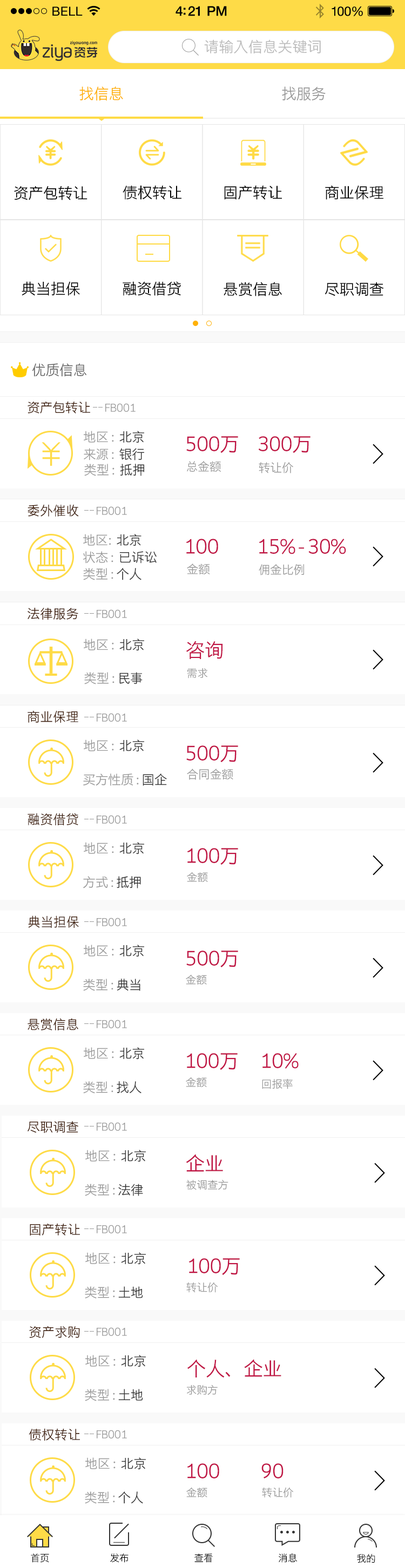
<style>
.page{position:relative;width:405px;height:1568px;background:#ffffff}
.page>*{position:absolute;margin:0}
.t1{font:13.5px "HelveticaNeue-Medium";letter-spacing:-0.02em;color:#000000}
.t2{font:12.4px "HelveticaNeue";letter-spacing:0.02em;color:#000000}
.t3{font:13px "HelveticaNeue";letter-spacing:-0.02em;color:#010101}
.t4{font:14.7px "STHeitiSC-Light";color:#bbbbbb}
.t5{font:15.1px "STHeitiSC-Light";letter-spacing:-0.02em;color:#ffb107}
.t6{font:15.1px "STHeitiSC-Light";letter-spacing:-0.02em;color:#999999}
.t7{font:15.1px "STHeitiSC-Light";letter-spacing:-0.02em;color:#000000}
.t8{font:14px "STHeitiSC-Light";letter-spacing:-0.02em;color:#666666}
.t9{font:13px "STHeitiSC-Light";letter-spacing:-0.02em;color:#41210f}
.t10{font:10.8px "STHeitiSC-Light";letter-spacing:-0.02em;color:#999999}
.t11{font:13px "STHeitiSC-Light";letter-spacing:-0.02em;color:#999999}
.t12{font:13px "STHeitiSC-Light";letter-spacing:-0.02em;color:#333333}
.t13{font:19.4px "STHeitiSC-Light";letter-spacing:-0.02em;color:#c01444}
.t14{font:11.9px "STHeitiSC-Light";letter-spacing:-0.02em;color:#999999}
.t15{font:13px "STHeitiSC-Light";color:#41210f}
.t16{font:9.7px "STHeitiSC-Light";letter-spacing:-0.02em;color:#000000}
</style>
<div class="page">
<p class="t1" style="left:175px;top:6px;width:52px;height:10px">4:21 PM</p>
<p class="t2" style="left:52px;top:6px;width:31px;height:10px">BELL</p>
<p class="t3" style="left:331px;top:6px;width:32px;height:10px">100%</p>
<p class="t4" style="left:204px;top:39px;width:117px;height:14px">请输入信息关键词</p>
<p class="t5" style="left:79px;top:86px;width:44px;height:15px">找信息</p>
<p class="t6" style="left:282px;top:86px;width:43px;height:15px">找服务</p>
<p class="t7" style="left:14px;top:186px;width:73px;height:14px">资产包转让</p>
<p class="t7" style="left:123px;top:185px;width:58px;height:15px">债权转让</p>
<p class="t7" style="left:224px;top:185px;width:58px;height:15px">固产转让</p>
<p class="t7" style="left:325px;top:185px;width:58px;height:15px">商业保理</p>
<p class="t7" style="left:22px;top:281px;width:58px;height:15px">典当担保</p>
<p class="t7" style="left:123px;top:281px;width:58px;height:15px">融资借贷</p>
<p class="t7" style="left:223px;top:282px;width:59px;height:14px">悬赏信息</p>
<p class="t7" style="left:324px;top:282px;width:60px;height:14px">尽职调查</p>
<p class="t8" style="left:32px;top:363px;width:55px;height:14px">优质信息</p>
<p class="t9" style="left:28px;top:401px;width:62px;height:12px">资产包转让</p>
<p class="t10" style="left:105px;top:403px;width:30px;height:9px">FB001</p>
<p class="t11" style="left:84px;top:431px;width:60px;height:12px">地区 :  <span class="t12">北京</span></p>
<p class="t13" style="left:186px;top:436px;width:52px;height:17px">500万</p>
<p class="t13" style="left:258px;top:436px;width:52px;height:17px">300万</p>
<p class="t11" style="left:84px;top:448px;width:60px;height:12px">来源 :  <span class="t12">银行</span></p>
<p class="t14" style="left:187px;top:461px;width:34px;height:11px">总金额</p>
<p class="t11" style="left:84px;top:464px;width:60px;height:12px">类型 :  <span class="t12">抵押</span></p>
<p class="t14" style="left:259px;top:462px;width:34px;height:11px">转让价</p>
<p class="t15" style="left:28px;top:504px;width:51px;height:13px">委外催收</p>
<p class="t10" style="left:97px;top:506px;width:30px;height:9px">FB001</p>
<p class="t11" style="left:83px;top:534px;width:58px;height:12px">地区:  <span class="t12">北京</span></p>
<p class="t13" style="left:186px;top:539px;width:32px;height:15px">100</p>
<p class="t13" style="left:259px;top:539px;width:87px;height:15px">15% - 30%</p>
<p class="t11" style="left:83px;top:551px;width:74px;height:13px">状态 :  <span class="t12">已诉讼</span></p>
<p class="t11" style="left:83px;top:568px;width:58px;height:12px">类型 : <span class="t12">个人</span></p>
<p class="t14" style="left:187px;top:564px;width:23px;height:11px">金额</p>
<p class="t14" style="left:259px;top:564px;width:45px;height:11px">佣金比例</p>
<p class="t15" style="left:28px;top:607px;width:50px;height:13px">法律服务</p>
<p class="t10" style="left:97px;top:609px;width:30px;height:9px">FB001</p>
<p class="t11" style="left:84px;top:639px;width:60px;height:12px">地区 :  <span class="t12">北京</span></p>
<p class="t13" style="left:186px;top:641px;width:37px;height:18px">咨询</p>
<p class="t11" style="left:84px;top:672px;width:58px;height:12px">类型 : <span class="t12">民事</span></p>
<p class="t10" style="left:187px;top:668px;width:20px;height:10px">需求</p>
<p class="t15" style="left:28px;top:710px;width:50px;height:13px">商业保理</p>
<p class="t10" style="left:97px;top:713px;width:30px;height:9px">FB001</p>
<p class="t11" style="left:84px;top:739px;width:60px;height:13px">地区 :  <span class="t12">北京</span></p>
<p class="t13" style="left:186px;top:745px;width:52px;height:18px">500万</p>
<p class="t11" style="left:83px;top:773px;width:84px;height:13px">买方性质 : <span class="t12">国企</span></p>
<p class="t14" style="left:187px;top:769px;width:46px;height:11px">合同金额</p>
<p class="t15" style="left:28px;top:813px;width:50px;height:12px">融资借贷</p>
<p class="t10" style="left:97px;top:815px;width:30px;height:9px">FB001</p>
<p class="t11" style="left:84px;top:842px;width:60px;height:12px">地区 :  <span class="t12">北京</span></p>
<p class="t13" style="left:187px;top:848px;width:51px;height:17px">100万</p>
<p class="t11" style="left:83px;top:876px;width:58px;height:12px">方式 : <span class="t12">抵押</span></p>
<p class="t10" style="left:187px;top:872px;width:21px;height:11px">金额</p>
<p class="t15" style="left:28px;top:915px;width:51px;height:13px">典当担保</p>
<p class="t10" style="left:97px;top:918px;width:30px;height:8px">FB001</p>
<p class="t11" style="left:84px;top:945px;width:60px;height:12px">地区 :  <span class="t12">北京</span></p>
<p class="t13" style="left:186px;top:951px;width:52px;height:17px">500万</p>
<p class="t10" style="left:186px;top:974px;width:21px;height:11px">金额</p>
<p class="t11" style="left:83px;top:979px;width:57px;height:12px">类型 : <span class="t12">典当</span></p>
<p class="t15" style="left:28px;top:1018px;width:50px;height:12px">悬赏信息</p>
<p class="t10" style="left:97px;top:1020px;width:30px;height:8px">FB001</p>
<p class="t11" style="left:84px;top:1047px;width:60px;height:13px">地区 :  <span class="t12">北京</span></p>
<p class="t13" style="left:187px;top:1053px;width:50px;height:17px">100万</p>
<p class="t13" style="left:262px;top:1053px;width:36px;height:16px">10%</p>
<p class="t11" style="left:83px;top:1081px;width:58px;height:13px">类型 : <span class="t12">找人</span></p>
<p class="t10" style="left:186px;top:1077px;width:21px;height:11px">金额</p>
<p class="t10" style="left:262px;top:1078px;width:31px;height:11px">回报率</p>
<p class="t15" style="left:28px;top:1121px;width:50px;height:12px">尽职调查</p>
<p class="t10" style="left:97px;top:1122px;width:30px;height:9px">FB001</p>
<p class="t11" style="left:85px;top:1150px;width:61px;height:12px">地区 :  <span class="t12">北京</span></p>
<p class="t13" style="left:186px;top:1154px;width:37px;height:18px">企业</p>
<p class="t10" style="left:186px;top:1179px;width:42px;height:11px">被调查方</p>
<p class="t11" style="left:85px;top:1184px;width:58px;height:12px">类型 : <span class="t12">法律</span></p>
<p class="t15" style="left:30px;top:1223px;width:50px;height:13px">固产转让</p>
<p class="t10" style="left:97px;top:1225px;width:30px;height:8px">FB001</p>
<p class="t11" style="left:85px;top:1252px;width:61px;height:13px">地区 :  <span class="t12">北京</span></p>
<p class="t13" style="left:189px;top:1258px;width:51px;height:17px">100万</p>
<p class="t11" style="left:85px;top:1286px;width:58px;height:13px">类型 : <span class="t12">土地</span></p>
<p class="t10" style="left:186px;top:1282px;width:32px;height:11px">转让价</p>
<p class="t15" style="left:29px;top:1326px;width:51px;height:12px">资产求购</p>
<p class="t10" style="left:97px;top:1327px;width:30px;height:9px">FB001</p>
<p class="t11" style="left:85px;top:1355px;width:61px;height:12px">地区 :  <span class="t12">北京</span></p>
<p class="t13" style="left:187px;top:1359px;width:94px;height:19px">个人、企业</p>
<p class="t10" style="left:187px;top:1384px;width:31px;height:11px">求购方</p>
<p class="t11" style="left:85px;top:1389px;width:58px;height:12px">类型 : <span class="t12">土地</span></p>
<p class="t15" style="left:29px;top:1428px;width:51px;height:13px">债权转让</p>
<p class="t10" style="left:97px;top:1430px;width:30px;height:8px">FB001</p>
<p class="t11" style="left:85px;top:1457px;width:61px;height:13px">地区 :  <span class="t12">北京</span></p>
<p class="t13" style="left:187px;top:1463px;width:32px;height:15px">100</p>
<p class="t13" style="left:261px;top:1463px;width:22px;height:15px">90</p>
<p class="t11" style="left:85px;top:1491px;width:58px;height:13px">类型 : <span class="t12">个人</span></p>
<p class="t10" style="left:186px;top:1487px;width:21px;height:11px">金额</p>
<p class="t10" style="left:262px;top:1487px;width:31px;height:11px">转让价</p>
<p class="t16" style="left:31px;top:1553px;width:18px;height:10px">首页</p>
<p class="t16" style="left:110px;top:1553px;width:18px;height:10px">发布</p>
<p class="t16" style="left:194px;top:1553px;width:19px;height:10px">查看</p>
<p class="t16" style="left:279px;top:1553px;width:18px;height:10px">消息</p>
<p class="t16" style="left:357px;top:1554px;width:18px;height:9px">我的</p>
</div>
